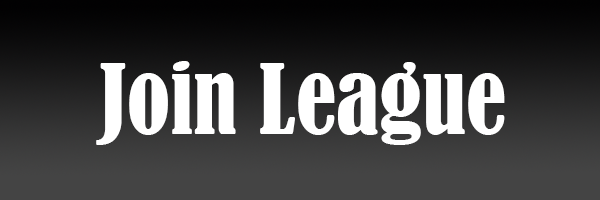
<style>
.page{position:relative;width:600px;height:200px}
.page>*{position:absolute;margin:0}
.t1{font:90px "BernardMT-Condensed";color:#ffffff}
</style>
<div class="page">
<p class="t1" style="left:96px;top:61px;width:409px;height:84px">Join League</p>
</div>
